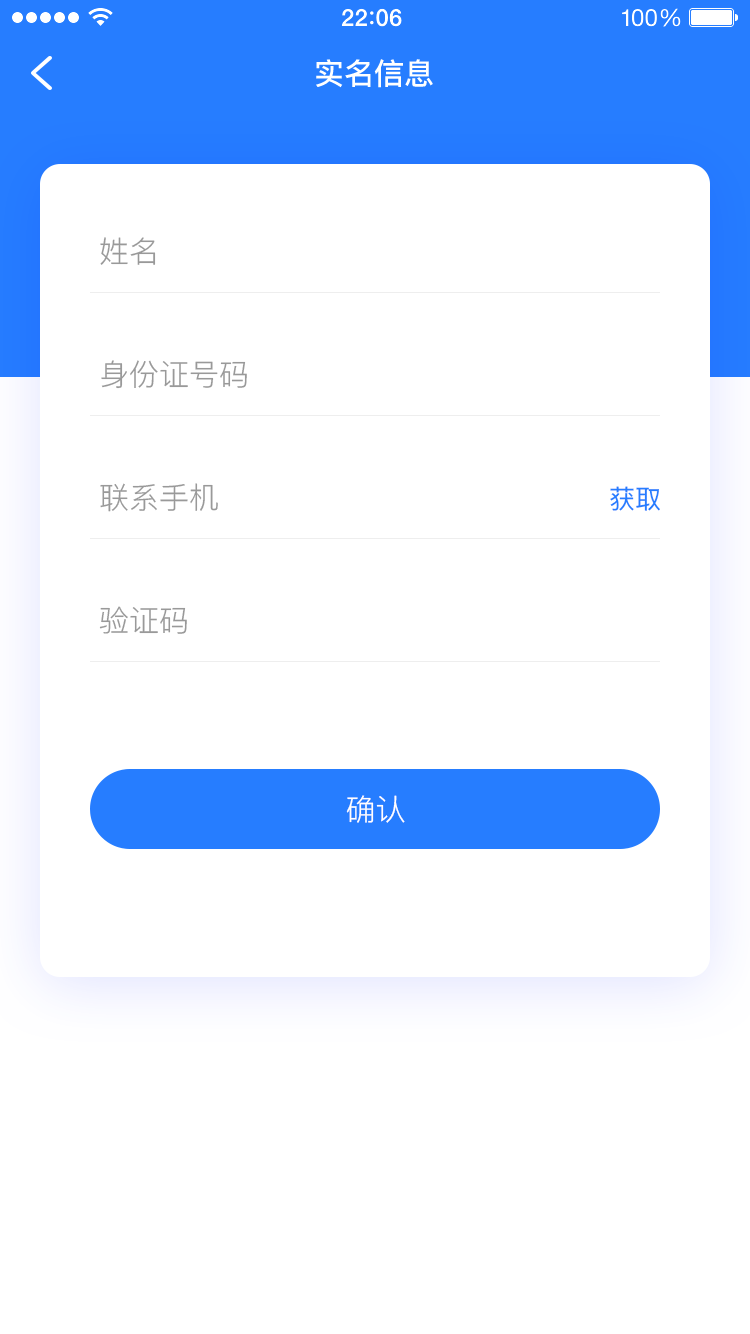
<style>
.page{position:relative;width:750px;height:1334px;background:#ffffff}
.page>*{position:absolute;margin:0}
.t1{font:30px "PingFangSC-Medium";color:#ffffff}
.t2{font:30px "PingFang-SC-Regular";color:#999999}
.t3{font:26px "PingFangSC-Regular";color:#267dff}
.t4{font:30px "PingFang-SC-Regular";color:#ffffff}
</style>
<div class="page">
<p class="t1" style="left:316px;top:59px;width:117px;height:29px">实名信息</p>
<p class="t2" style="left:100px;top:237px;width:56px;height:28px">姓名</p>
<p class="t2" style="left:101px;top:360px;width:146px;height:29px">身份证号码</p>
<p class="t2" style="left:100px;top:483px;width:118px;height:29px">联系手机</p>
<p class="t3" style="left:610px;top:486px;width:50px;height:25px">获取</p>
<p class="t2" style="left:99px;top:606px;width:88px;height:28px">验证码</p>
<p class="t4" style="left:346px;top:795px;width:59px;height:28px">确认</p>
</div>
